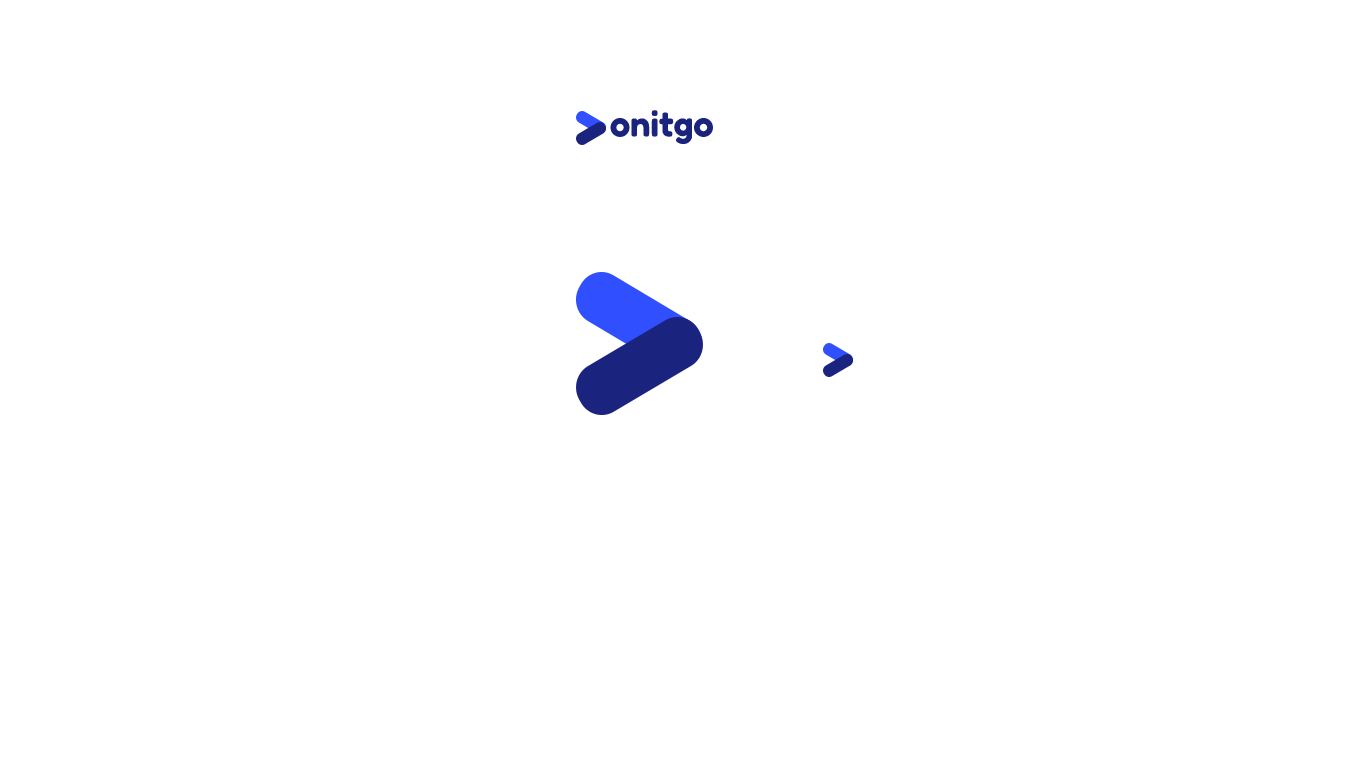
<style>
.page{position:relative;width:1366px;height:768px;background:#ffffff}
.page>*{position:absolute;margin:0}
.t1{font:36px "Fredoka-SemiBold";color:#1a237e}
</style>
<div class="page">
<p class="t1" style="left:610px;top:110px;width:103px;height:34px">onitgo</p>
</div>
